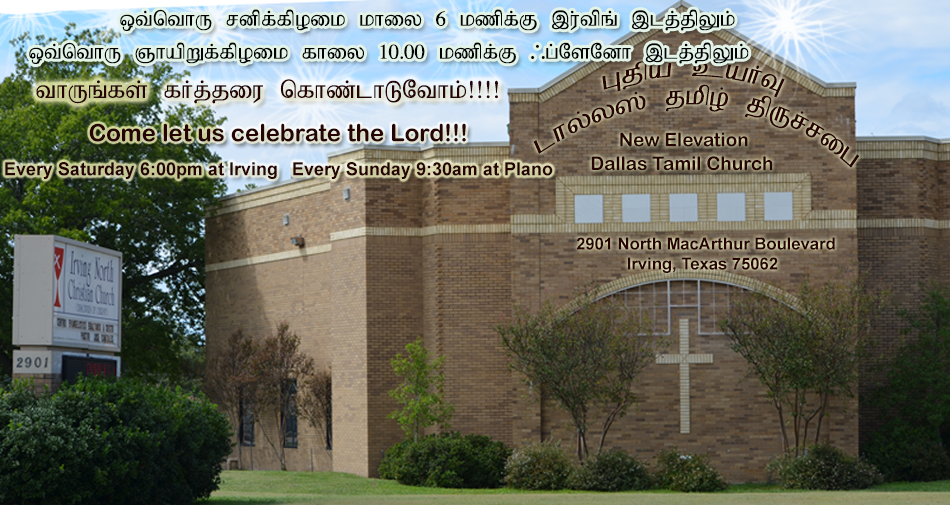
<style>
.page{position:relative;width:950px;height:505px}
.page>*{position:absolute;margin:0}
.t1{font:24px "Bamini-Plain";color:#000203}
.t2{font:30.9px "Bamini-Plain";color:#250403;scale:0.83 1}
.t3{font:28px "Bamini-Plain";color:#250403}
.t4{font:24px "ArialRoundedMTBold";color:#250403}
.t5{font:19px "ArialRoundedMTBold";color:#250403}
.t6{font:18px "Arial-BoldMT";color:#250403}
.t7{font:16.6px "Arial-BoldMT";color:#250403}
</style>
<div class="page">
<p class="t1" style="left:120px;top:9px;width:615px;height:22px">xt;nthU rdpf;fpoik khiy 6 kzpf;F ,u;tpq; ,lj;jpYk;</p>
<p class="t1" style="left:29px;top:42px;width:720px;height:22px">xt;nthU QhapWf;fpoik fhiy 10.00 kzpf;F /g;NsNdh ,lj;jpYk;</p>
<p class="t2" style="left:602px;top:61px;width:183px;height:37px;rotate:32deg">Gjpa caHT</p>
<p class="t3" style="left:36px;top:79px;width:462px;height:25px">thUq;fs; fHj;jiu nfhz;lhLNthk;!!!!</p>
<p class="t2" style="left:533px;top:84px;width:327px;height:84px;rotate:15deg">lhy;y]; jkpo; jpUr;rig</p>
<p class="t4" style="left:89px;top:123px;width:377px;height:19px">Come let us celebrate the Lord!!!</p>
<p class="t5" style="left:620px;top:132px;width:128px;height:15px">New Elevation</p>
<p class="t5" style="left:591px;top:156px;width:182px;height:15px">Dallas Tamil Church</p>
<p class="t6" style="left:5px;top:162px;width:272px;height:17px">Every Saturday 6:00pm at Irving</p>
<p class="t6" style="left:293px;top:162px;width:260px;height:17px">Every Sunday 9:30am at Plano</p>
<p class="t7" style="left:576px;top:237px;width:259px;height:36px">2901 North MacArthur Boulevard <br>           Irving, Texas 75062</p>
</div>
